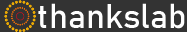
<style>
.page{position:relative;width:187px;height:32px;background:#333333}
.page>*{position:absolute;margin:0}
.t1{font:34px "Bahnschrift";color:#ffffff}
</style>
<div class="page">
<p class="t1" style="left:38px;top:3px;width:147px;height:26px">thankslab</p>
</div>
